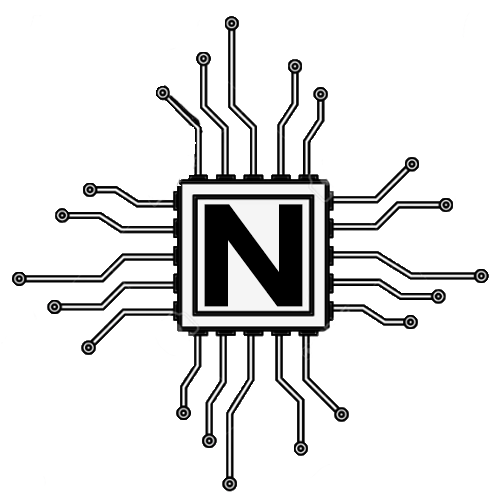
<style>
.page{position:relative;width:500px;height:500px;background:#ffffff}
.page>*{position:absolute;margin:0}
.t1{font:142.6px "Arial-BoldMT";color:#000000;scale:1.2 1}
</style>
<div class="page">
<p class="t1" style="left:204px;top:204px;width:99px;height:103px">N</p>
</div>
